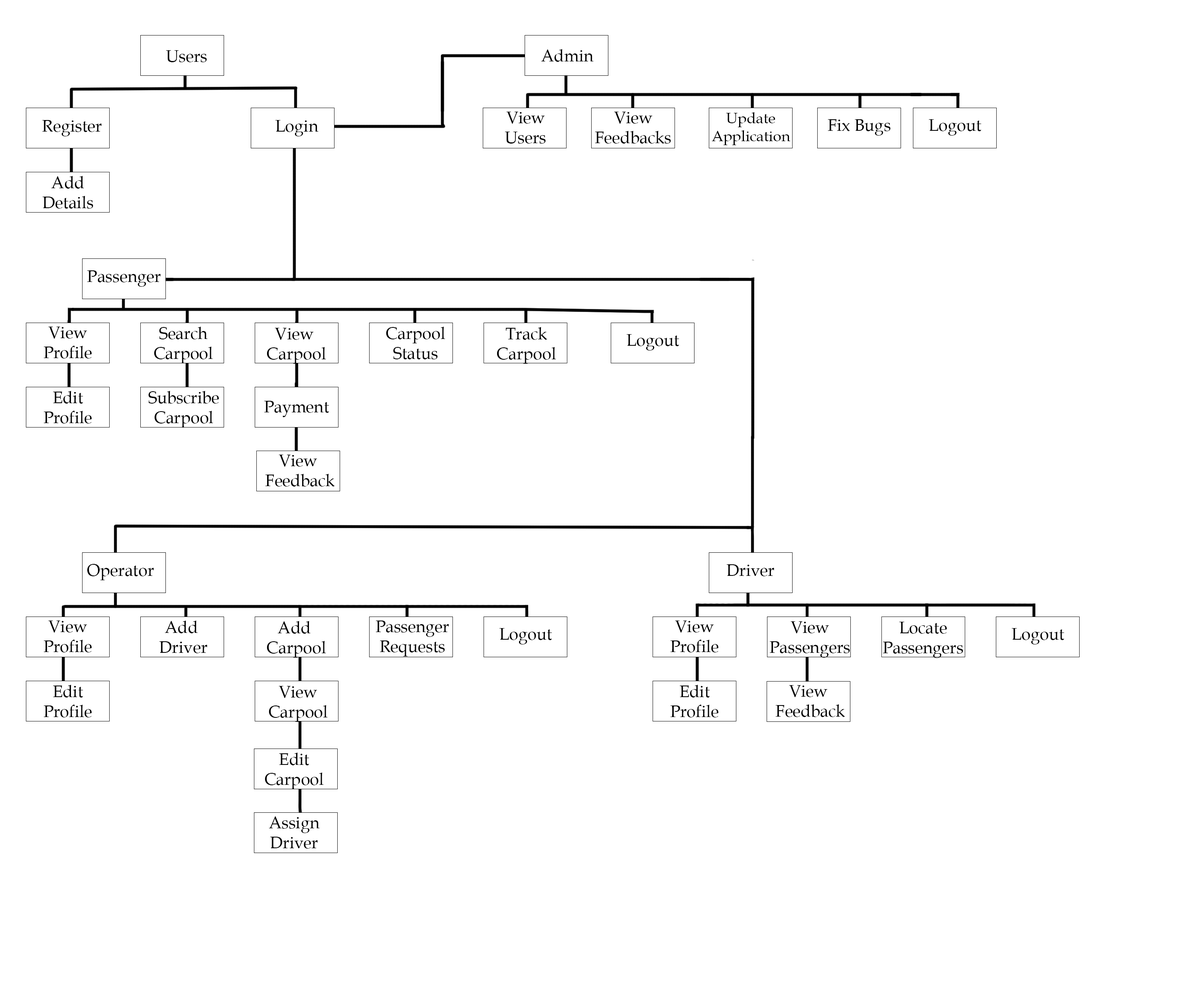
<style>
.page{position:relative;width:1196px;height:997px;background:#ffffff}
.page>*{position:absolute;margin:0}
.t1{font:16.6px "BookAntiqua";color:#000000}
.t2{font:15px "BookAntiqua";color:#000000}
</style>
<div class="page">
<p class="t1" style="left:166px;top:50px;width:41px;height:12px">Users</p>
<p class="t1" style="left:541px;top:49px;width:53px;height:13px">Admin</p>
<p class="t1" style="left:505px;top:112px;width:41px;height:32px;text-align:center">View<br>Users</p>
<p class="t1" style="left:595px;top:112px;width:76px;height:32px;text-align:center">View <br>Feedbacks</p>
<p class="t2" style="left:712px;top:112px;width:78px;height:33px;text-align:center">Update<br>Application</p>
<p class="t1" style="left:42px;top:120px;width:60px;height:16px">Register</p>
<p class="t1" style="left:276px;top:120px;width:43px;height:16px">Login</p>
<p class="t1" style="left:828px;top:119px;width:63px;height:17px">Fix Bugs</p>
<p class="t1" style="left:929px;top:119px;width:53px;height:17px">Logout</p>
<p class="t1" style="left:42px;top:176px;width:51px;height:33px;text-align:center">Add<br>Details</p>
<p class="t1" style="left:87px;top:270px;width:74px;height:17px">Passenger</p>
<p class="t1" style="left:44px;top:327px;width:48px;height:31px;text-align:center">View<br>Profile</p>
<p class="t1" style="left:154px;top:327px;width:59px;height:36px;text-align:center">Search<br>Carpool</p>
<p class="t1" style="left:267px;top:328px;width:59px;height:36px;text-align:center">View <br>Carpool</p>
<p class="t1" style="left:386px;top:327px;width:59px;height:32px;text-align:center">Carpool<br>Status</p>
<p class="t1" style="left:497px;top:327px;width:59px;height:37px;text-align:center">Track<br>Carpool</p>
<p class="t1" style="left:627px;top:334px;width:52px;height:16px">Logout</p>
<p class="t1" style="left:44px;top:391px;width:48px;height:32px;text-align:center">Edit<br>Profile</p>
<p class="t1" style="left:148px;top:391px;width:71px;height:36px;text-align:center">Subscribe<br>Carpool</p>
<p class="t1" style="left:264px;top:401px;width:65px;height:16px">Payment</p>
<p class="t1" style="left:265px;top:455px;width:70px;height:31px;text-align:center">View <br>Feedback</p>
<p class="t1" style="left:87px;top:564px;width:67px;height:16px">Operator</p>
<p class="t1" style="left:726px;top:564px;width:48px;height:12px">Driver</p>
<p class="t1" style="left:44px;top:620px;width:48px;height:32px;text-align:center">View<br>Profile</p>
<p class="t1" style="left:159px;top:620px;width:48px;height:33px;text-align:center">Add <br>Driver</p>
<p class="t1" style="left:267px;top:621px;width:59px;height:37px;text-align:center">Add <br>Carpool</p>
<p class="t1" style="left:376px;top:620px;width:73px;height:36px;text-align:center">Passenger<br>Requests</p>
<p class="t1" style="left:500px;top:628px;width:52px;height:16px">Logout</p>
<p class="t1" style="left:671px;top:620px;width:48px;height:32px;text-align:center">View<br>Profile</p>
<p class="t1" style="left:770px;top:621px;width:80px;height:37px;text-align:center">View<br>Passengers</p>
<p class="t1" style="left:883px;top:622px;width:80px;height:36px;text-align:center">Locate<br>Passengers</p>
<p class="t1" style="left:1012px;top:628px;width:53px;height:16px">Logout</p>
<p class="t1" style="left:44px;top:685px;width:48px;height:32px;text-align:center">Edit<br>Profile</p>
<p class="t1" style="left:269px;top:686px;width:59px;height:36px;text-align:center">View<br>Carpool</p>
<p class="t1" style="left:671px;top:685px;width:48px;height:32px;text-align:center">Edit<br>Profile</p>
<p class="t1" style="left:776px;top:685px;width:69px;height:32px;text-align:center">View <br>Feedback</p>
<p class="t1" style="left:265px;top:752px;width:59px;height:37px;text-align:center">Edit<br>Carpool</p>
<p class="t1" style="left:269px;top:816px;width:51px;height:33px;text-align:center">Assign<br>Driver</p>
</div>
